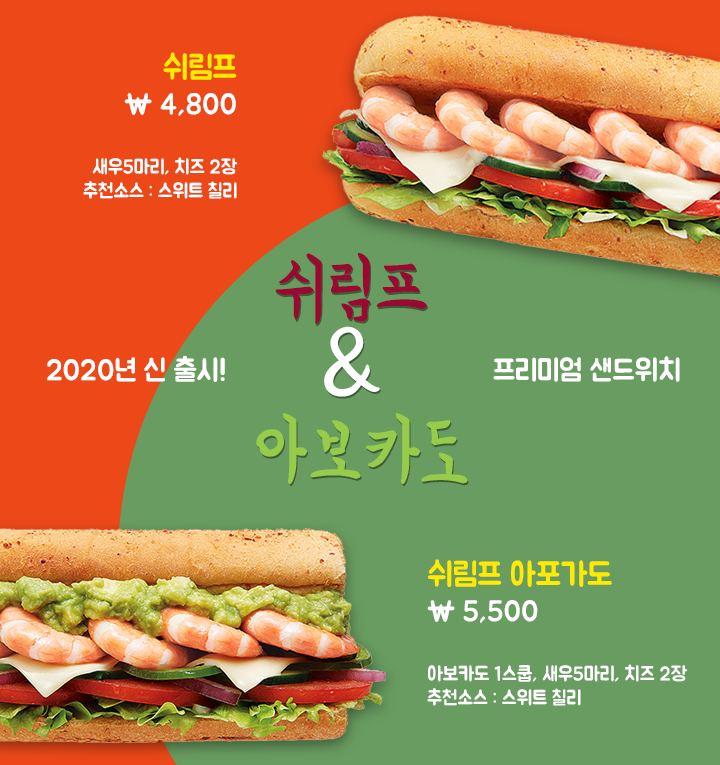
<style>
.page{position:relative;width:720px;height:765px;background:#689c60}
.page>*{position:absolute;margin:0}
.t1{font:20px "BMJUA";color:#ffffff;scale:0.95 1}
.t2{font:33px "BMJUA";color:#ffea00;scale:0.95 1}
.t3{font:30px "BMJUA";color:#ffffff;scale:0.95 1}
.t4{font:80px/80px "BMYEONSUNG";color:#96cc4a;scale:0.95 1}
.t5{font:80px/80px "BMYEONSUNG";color:#980a32;scale:0.95 1}
.t6{font:100px/80px "BMYEONSUNG";color:#ffffff;scale:0.95 1}
</style>
<div class="page">
<p class="t1" style="left:83px;top:52px;width:155px;height:147px;text-align:right"><span class="t2">쉬림프<br></span><span class="t3">\ 4,800<br><br></span>새우5마리, 치즈 2장<br>추천소스 : 스위트 칠리</p>
<p class="t4" style="left:256px;top:253px;width:212px;height:232px;text-align:center"><span class="t5">쉬림프 <br></span><span class="t6">&amp; <br></span>아보카도</p>
<p class="t3" style="left:47px;top:355px;width:178px;height:27px">2020년 신 출시!</p>
<p class="t3" style="left:493px;top:356px;width:187px;height:26px">프리미엄 샌드위치</p>
<p class="t1" style="left:427px;top:559px;width:261px;height:147px"><span class="t2">쉬림프 아포가도<br></span><span class="t3">\ 5,500<br><br></span>아보카도 1스쿱, 새우5마리, 치즈 2장<br>추천소스 : 스위트 칠리</p>
</div>
